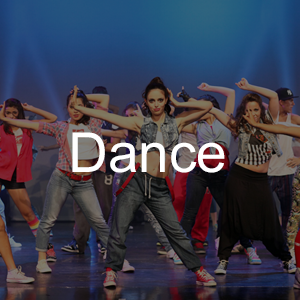
<style>
.page{position:relative;width:300px;height:300px}
.page>*{position:absolute;margin:0}
.t1{font:55px "ArialMT";color:#ffffff}
</style>
<div class="page">
<p class="t1" style="left:72px;top:132px;width:153px;height:41px">Dance</p>
</div>
